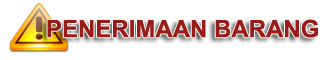
<style>
.page{position:relative;width:324px;height:60px;background:#ffffff}
.page>*{position:absolute;margin:0}
.t1{font:24px "Arial-BoldMT";color:#991c18}
</style>
<div class="page">
<p class="t1" style="left:47px;top:19px;width:271px;height:19px">PENERIMAAN BARANG</p>
</div>
